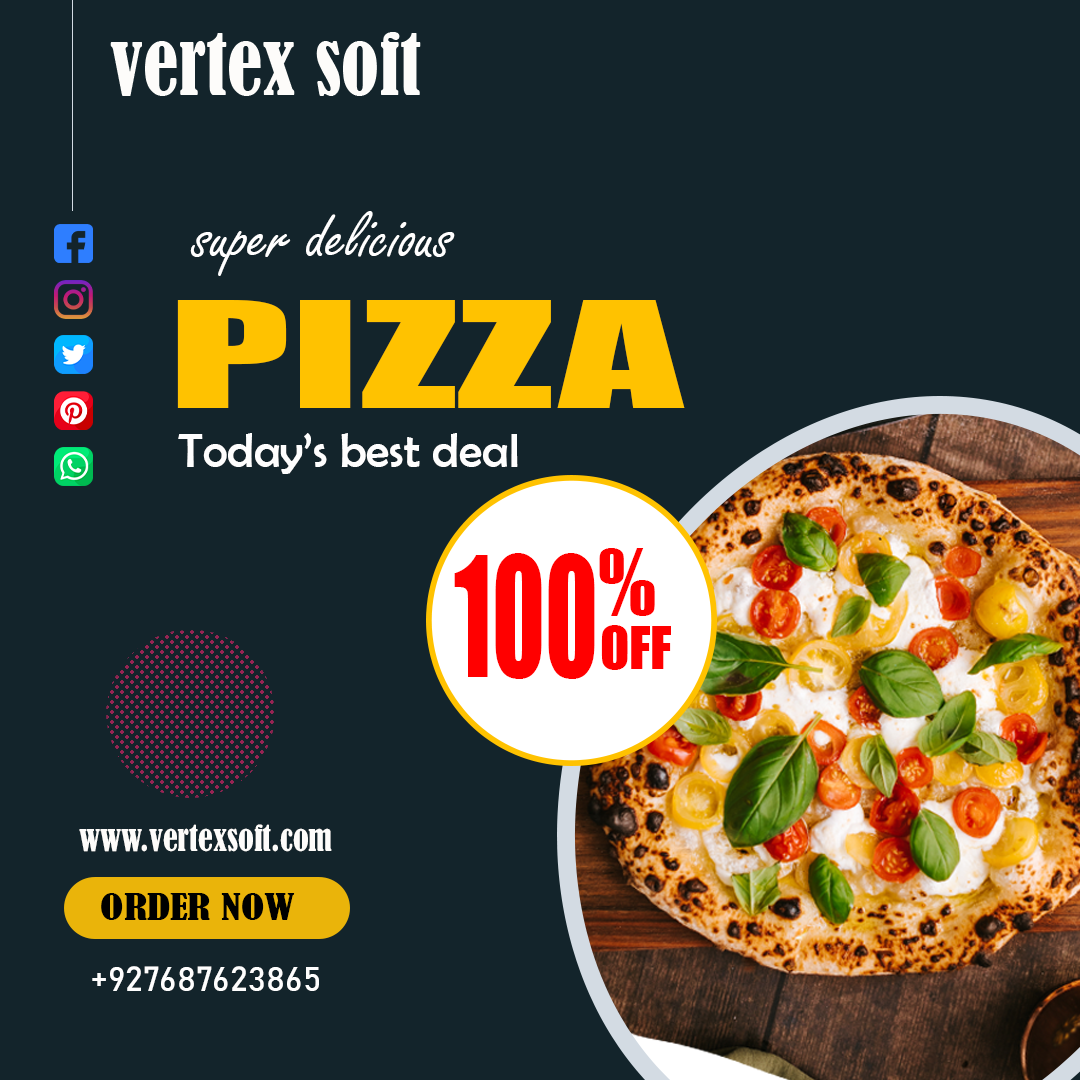
<style>
.page{position:relative;width:1080px;height:1080px;background:#13242b}
.page>*{position:absolute;margin:0}
.t1{font:71.4px "FreestyleScript-Regular";color:#ffffff}
.t2{font:136px "Impact";color:#ffc200;scale:1.79 1}
.t3{font:48px "BerlinSansFB-Reg";color:#fefefe}
.t4{font:153.6px "Impact";color:#ff0000;scale:0.65 1}
.t5{font:83.7px "Impact";color:#ff0000}
.t6{font:53.6px "Impact";color:#ff0000}
.t7{font:32.9px "BernardMT-Condensed";color:#fdfcfa}
.t8{font:33.7px "BernardMT-Condensed";color:#000000;scale:1.27 1}
.t9{font:34.4px "Bahnschrift";color:#fefefe}
</style>
<div class="page">
<p class="t1" style="left:190px;top:211px;width:265px;height:65px">super delicious</p>
<p class="t2" style="left:177px;top:300px;width:508px;height:108px">PIZZA</p>
<p class="t3" style="left:178px;top:433px;width:340px;height:41px">Today’s best deal</p>
<p class="t4" style="left:454px;top:553px;width:141px;height:126px">100</p>
<p class="t5" style="left:599px;top:548px;width:56px;height:68px">%</p>
<p class="t6" style="left:601px;top:625px;width:70px;height:45px">OFF</p>
<p class="t7" style="left:79px;top:824px;width:253px;height:28px">www.vertexsoft.com</p>
<p class="t8" style="left:101px;top:893px;width:194px;height:27px">ORDER NOW</p>
<p class="t9" style="left:92px;top:966px;width:227px;height:25px">+927687623865</p>
</div>
